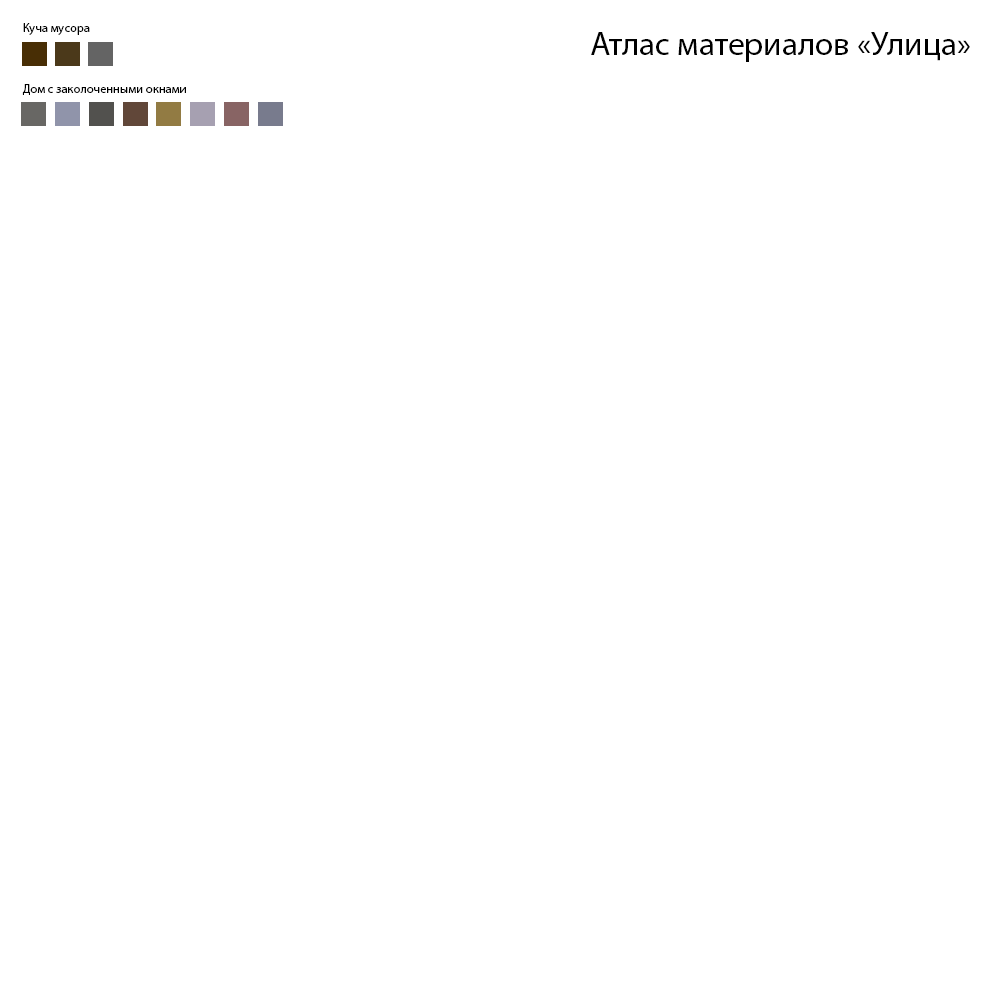
<style>
.page{position:relative;width:1000px;height:1000px;background:#ffffff}
.page>*{position:absolute;margin:0}
.t1{font:12.5px "MyriadPro-Regular";letter-spacing:0.001em;color:#000000}
.t2{font:33.3px "MyriadPro-Regular";letter-spacing:0.001em;color:#000000}
</style>
<div class="page">
<p class="t1" style="left:23px;top:23px;width:67px;height:12px">Куча мусора</p>
<p class="t2" style="left:591px;top:32px;width:379px;height:30px">Атлас материалов «Улица»</p>
<p class="t1" style="left:22px;top:84px;width:164px;height:11px">Дом с заколоченными окнами</p>
</div>
